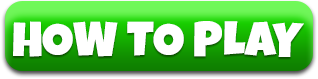
<style>
.page{position:relative;width:318px;height:79px;background:#ffffff}
.page>*{position:absolute;margin:0}
.t1{font:49px "LuckiestGuy-Regular";color:#ffffff;text-transform:uppercase}
</style>
<div class="page">
<p class="t1" style="left:13px;top:21px;width:291px;height:36px">how to play</p>
</div>
